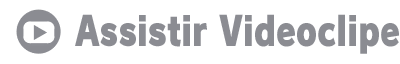
<style>
.page{position:relative;width:400px;height:64px;background:#ffffff}
.page>*{position:absolute;margin:0}
.t1{font:40px "RodinPro-UB";color:#8b8c92;scale:0.79 1}
</style>
<div class="page">
<p class="t1" style="left:75px;top:14px;width:324px;height:40px">Assistir Videoclipe</p>
</div>
